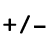
<style>
.page{position:relative;width:48px;height:48px;background:#ffffff}
.page>*{position:absolute;margin:0}
.t1{font:23.9px "Courier";color:#000000;font-weight:bold}
</style>
<div class="page">
<p class="t1" style="left:3px;top:15px;width:43px;height:19px">+/-</p>
</div>
